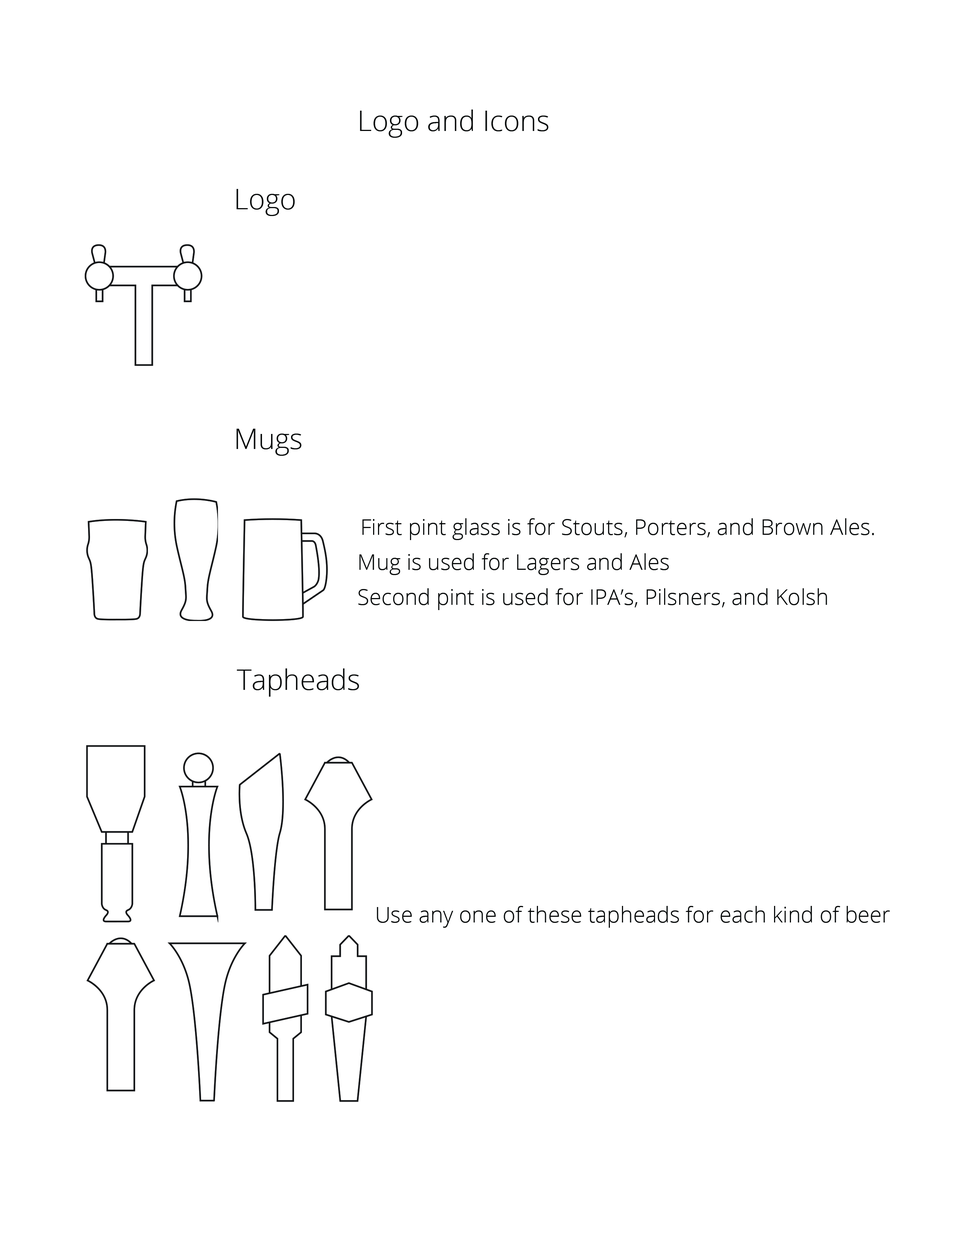
<style>
.page{position:relative;width:960px;height:1242px;background:#ffffff}
.page>*{position:absolute;margin:0}
.t1{font:28.2px "OpenSans-Light";color:#060808}
.t2{font:22px "OpenSans-Light";color:#060808}
</style>
<div class="page">
<p class="t1" style="left:360px;top:110px;width:188px;height:28px">Logo and Icons</p>
<p class="t1" style="left:236px;top:189px;width:59px;height:27px">Logo</p>
<p class="t1" style="left:236px;top:429px;width:66px;height:27px">Mugs</p>
<p class="t2" style="left:362px;top:518px;width:512px;height:22px">First pint glass is for Stouts, Porters, and Brown Ales.</p>
<p class="t2" style="left:359px;top:553px;width:310px;height:22px">Mug is used for Lagers and Ales</p>
<p class="t2" style="left:358px;top:588px;width:469px;height:22px">Second pint is used for IPA’s, Pilsners, and Kolsh</p>
<p class="t1" style="left:237px;top:669px;width:122px;height:28px">Tapheads</p>
<p class="t2" style="left:377px;top:906px;width:513px;height:22px">Use any one of these tapheads for each kind of beer</p>
</div>
